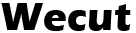
<style>
.page{position:relative;width:136px;height:33px;background:#ffffff}
.page>*{position:absolute;margin:0}
.t1{font:40px "ErasITC-Bold";color:#000000}
</style>
<div class="page">
<p class="t1" style="left:1px;top:3px;width:130px;height:28px">Wecut</p>
</div>
